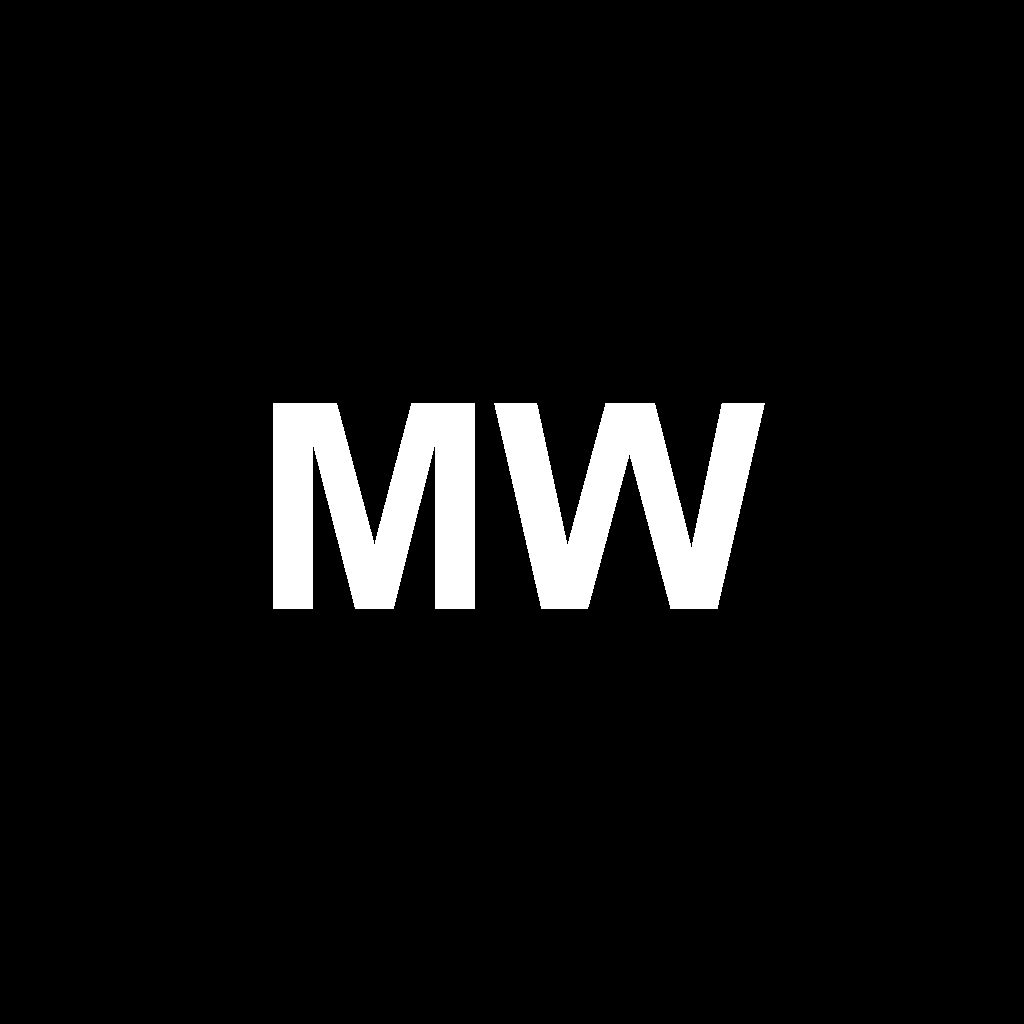
<style>
.page{position:relative;width:1024px;height:1024px;background:#000000}
.page>*{position:absolute;margin:0}
.t1{font:287.5px "Arial-BoldMT";color:#ffffff}
</style>
<div class="page">
<p class="t1" style="left:273px;top:403px;width:492px;height:206px">MW</p>
</div>
